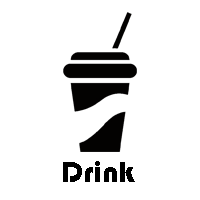
<style>
.page{position:relative;width:200px;height:200px;background:#ffffff}
.page>*{position:absolute;margin:0}
.t1{font:30px "Bauhaus93";color:#000000}
</style>
<div class="page">
<p class="t1" style="left:63px;top:161px;width:72px;height:21px">Drink</p>
</div>
